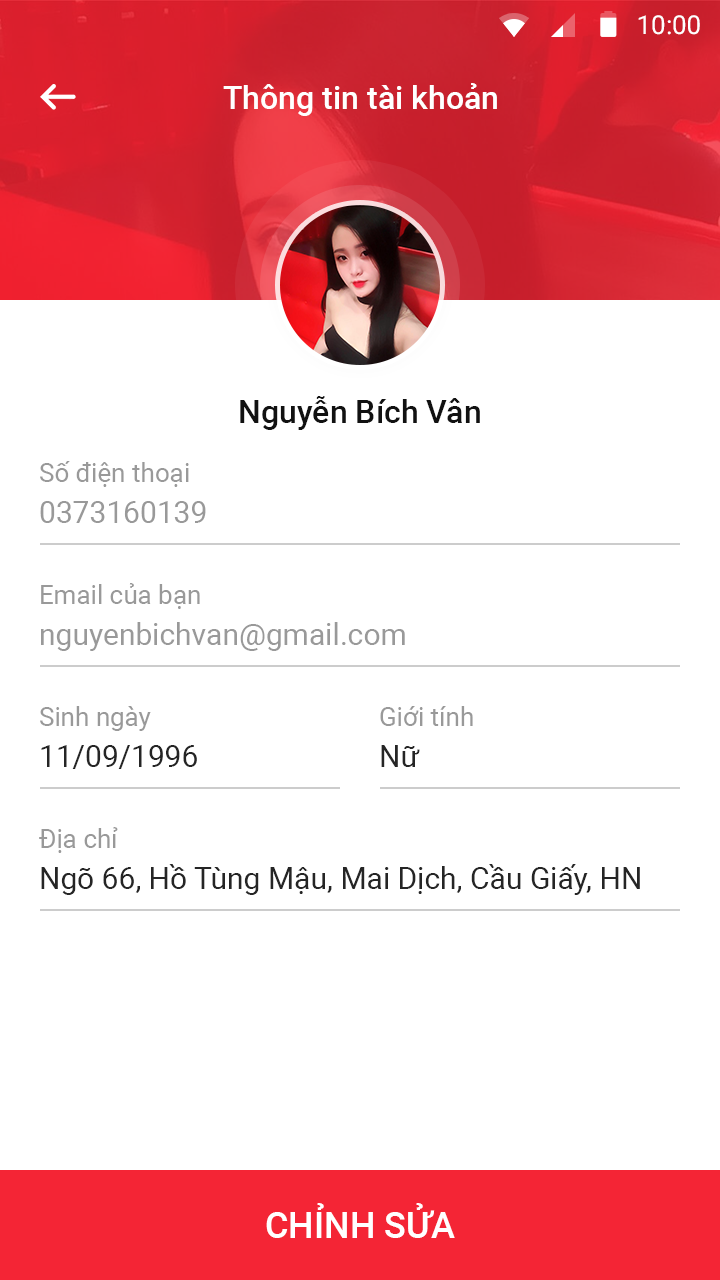
<style>
.page{position:relative;width:720px;height:1280px;background:#ffffff}
.page>*{position:absolute;margin:0}
.t1{font:26px "Roboto-Regular";color:#ffffff}
.t2{font:32px "Roboto-Medium";color:#ffffff}
.t3{font:32px "Roboto-Medium";color:#111111}
.t4{font:26px "Roboto-Regular";color:#999999}
.t5{font:30px "Roboto-Regular";color:#999999}
.t6{font:30px "Roboto-Regular";color:#252525}
.t7{font:36px "Roboto-Medium";color:#ffffff;text-transform:uppercase}
</style>
<div class="page">
<p class="t1" style="left:638px;top:15px;width:62px;height:20px">10:00</p>
<p class="t2" style="left:223px;top:83px;width:274px;height:33px">Thông tin tài khoản</p>
<p class="t3" style="left:240px;top:396px;width:240px;height:34px">Nguyễn Bích Vân</p>
<p class="t4" style="left:40px;top:461px;width:149px;height:26px">Số điện thoại</p>
<p class="t5" style="left:40px;top:501px;width:166px;height:22px">0373160139</p>
<p class="t4" style="left:41px;top:583px;width:159px;height:26px">Email của bạn</p>
<p class="t5" style="left:41px;top:622px;width:364px;height:29px">nguyenbichvan@gmail.com</p>
<p class="t4" style="left:40px;top:706px;width:111px;height:25px">Sinh ngày</p>
<p class="t4" style="left:380px;top:706px;width:93px;height:20px">Giới tính</p>
<p class="t6" style="left:41px;top:745px;width:156px;height:24px">11/09/1996</p>
<p class="t6" style="left:381px;top:745px;width:39px;height:22px">Nữ</p>
<p class="t4" style="left:39px;top:827px;width:79px;height:26px">Địa chỉ</p>
<p class="t6" style="left:41px;top:864px;width:599px;height:31px">Ngõ 66, Hồ Tùng Mậu, Mai Dịch, Cầu Giấy, HN</p>
<p class="t7" style="left:266px;top:1203px;width:189px;height:35px">chỉnh sửa</p>
</div>
